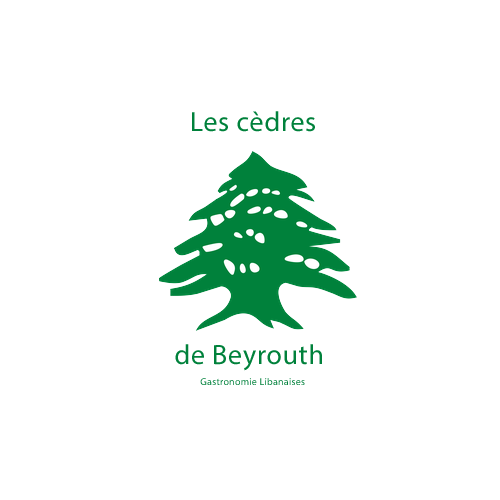
<style>
.page{position:relative;width:500px;height:500px;background:#ffffff}
.page>*{position:absolute;margin:0}
.t1{font:28px "MyriadPro-Regular";letter-spacing:0.025em;color:#00813b}
.t2{font:10px "MyriadPro-Regular";letter-spacing:0.025em;color:#00813b}
</style>
<div class="page">
<p class="t1" style="left:192px;top:111px;width:123px;height:21px">Les cèdres</p>
<p class="t1" style="left:175px;top:344px;width:147px;height:27px">de Beyrouth</p>
<p class="t2" style="left:200px;top:378px;width:105px;height:7px">Gastronomie Libanaises</p>
</div>
